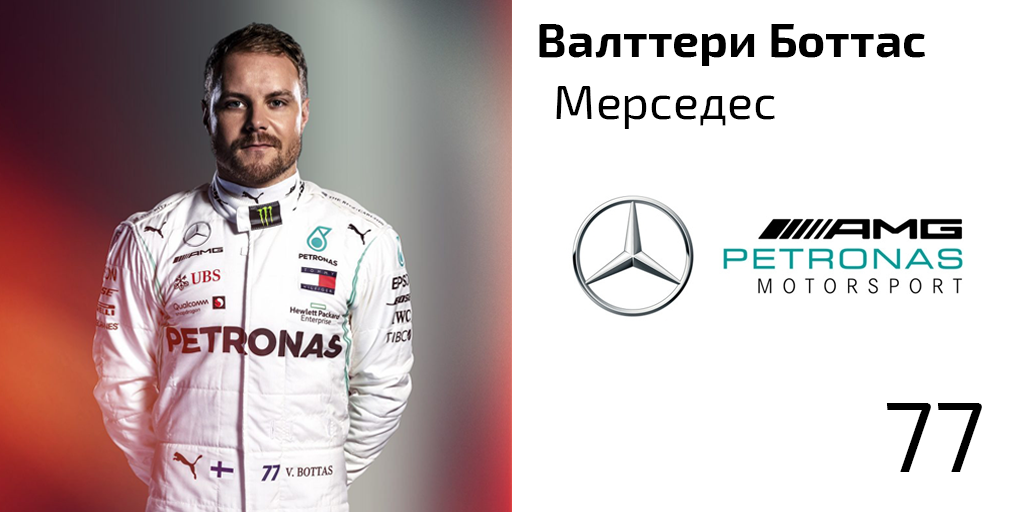
<style>
.page{position:relative;width:1024px;height:512px;background:#ffffff}
.page>*{position:absolute;margin:0}
.t1{font:48px "Exo2-Bold";color:#000000}
.t2{font:48px "Exo2-Regular";color:#000000}
.t3{font:100px "Exo2-Regular";color:#000000}
</style>
<div class="page">
<p class="t1" style="left:539px;top:24px;width:386px;height:42px">Валттери Боттас</p>
<p class="t2" style="left:556px;top:86px;width:219px;height:43px">Мерседес</p>
<p class="t3" style="left:886px;top:403px;width:96px;height:69px">77</p>
</div>
